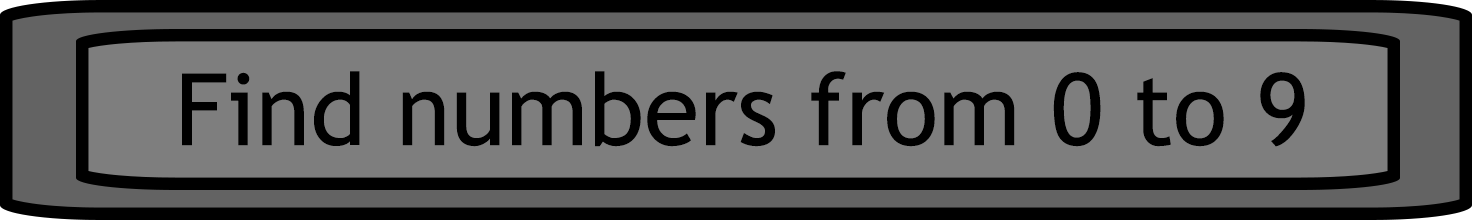
<style>
.page{position:relative;width:1472px;height:220px;background:#7e7e7e}
.page>*{position:absolute;margin:0}
.t1{font:100px "TrebuchetMS";color:#000000}
</style>
<div class="page">
<p class="t1" style="left:182px;top:71px;width:1123px;height:76px">Find numbers from 0 to 9</p>
</div>
